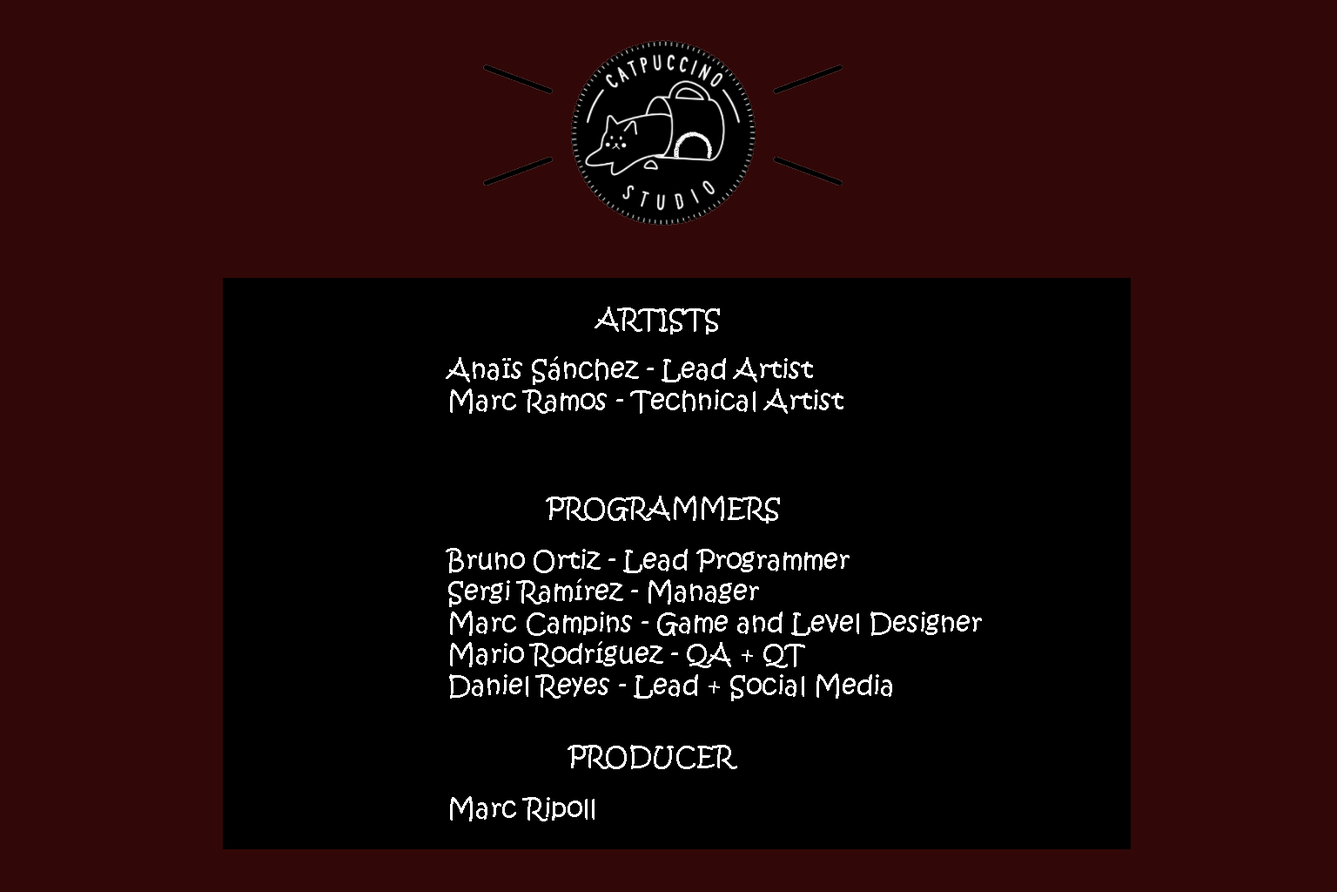
<style>
.page{position:relative;width:1337px;height:892px;background:#320707}
.page>*{position:absolute;margin:0}
.t1{font:26.1px "KristenITC-Regular";color:#ffffff}
</style>
<div class="page">
<p class="t1" style="left:595px;top:306px;width:125px;height:28px">ARTISTS</p>
<p class="t1" style="left:446px;top:356px;width:398px;height:58px">Anaïs Sánchez - Lead Artist<br>Marc Ramos - Technical Artist</p>
<p class="t1" style="left:546px;top:495px;width:234px;height:28px">PROGRAMMERS</p>
<p class="t1" style="left:446px;top:548px;width:536px;height:153px">Bruno Ortiz - Lead Programmer<br>Sergi Ramírez - Manager<br>Marc Campins - Game and Level Designer<br>Mario Rodríguez - QA + QT<br>Daniel Reyes - Lead + Social Media</p>
<p class="t1" style="left:568px;top:744px;width:169px;height:25px">PRODUCER</p>
<p class="t1" style="left:450px;top:796px;width:145px;height:25px">Marc Ripoll</p>
</div>
